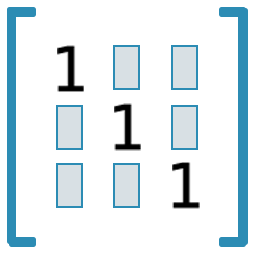
<style>
.page{position:relative;width:256px;height:256px;background:#ffffff}
.page>*{position:absolute;margin:0}
.t1{font:62.1px "DejaVuSansMono";color:#000000}
</style>
<div class="page">
<p class="t1" style="left:57px;top:45px;width:27px;height:47px">1</p>
<p class="t1" style="left:114px;top:103px;width:27px;height:48px">1</p>
<p class="t1" style="left:172px;top:162px;width:28px;height:47px">1</p>
</div>
